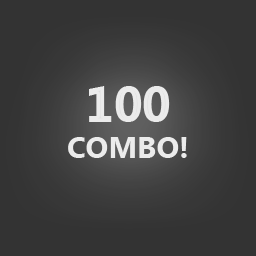
<style>
.page{position:relative;width:256px;height:256px;background:#333333}
.page>*{position:absolute;margin:0}
.t1{font:30px "MicrosoftTaiLe-Bold";color:#ebebeb}
.t2{font:50px "MicrosoftTaiLe-Bold";color:#ebebeb}
</style>
<div class="page">
<p class="t1" style="left:68px;top:86px;width:119px;height:72px;text-align:center"><span class="t2">100<br></span>COMBO!</p>
</div>
